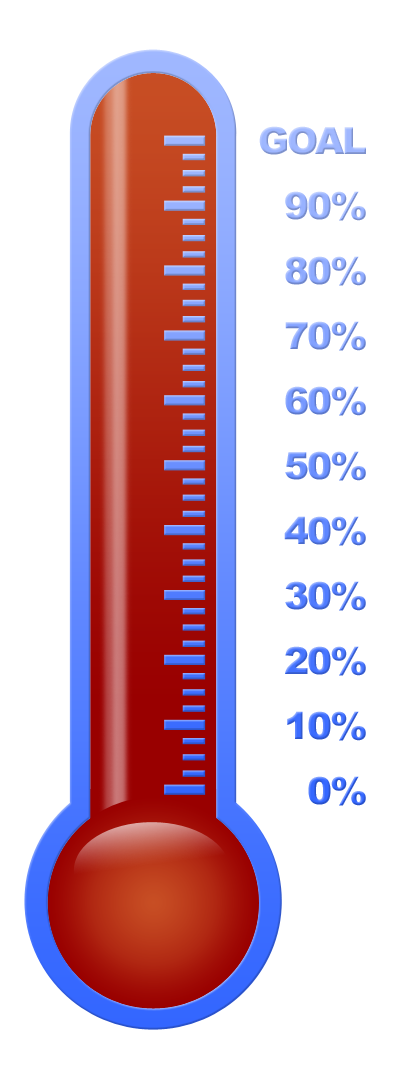
<style>
.page{position:relative;width:400px;height:1080px;background:#ffffff}
.page>*{position:absolute;margin:0}
.t1{font:37.5px/65px "Arial-Black";letter-spacing:-0.05em}
</style>
<div class="page">
<p class="t1" style="left:259px;top:126px;width:107px;height:680px;text-align:right">GOAL<br>90%<br>80%<br>70%<br>60%<br>50%<br>40%<br>30%<br>20%<br>10%<br>0%</p>
</div>
